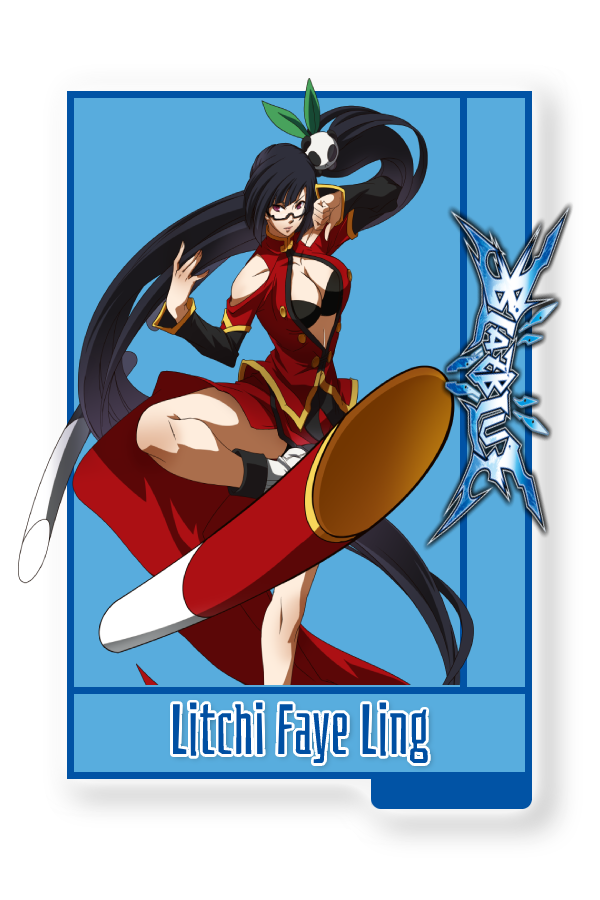
<style>
.page{position:relative;width:600px;height:900px;background:#ffffff}
.page>*{position:absolute;margin:0}
.t1{font:70px "Bahianita-Regular";color:#004fa2}
</style>
<div class="page">
<p class="t1" style="left:173px;top:702px;width:255px;height:62px">Litchi Faye Ling</p>
</div>
